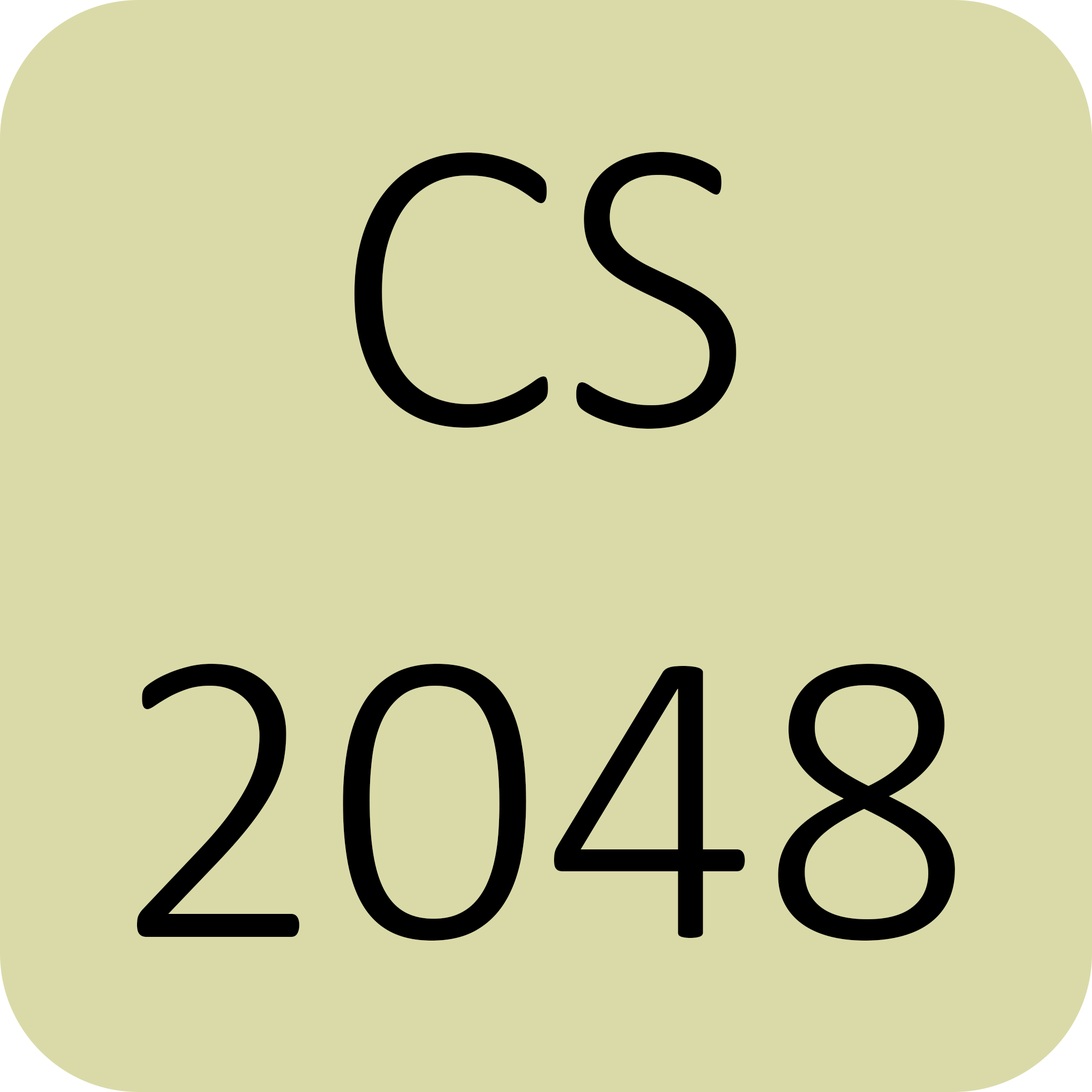
<style>
.page{position:relative;width:1092px;height:1092px;background:#dadaa9}
.page>*{position:absolute;margin:0}
.t1{font:426.6px "Calibri-Light";color:#000000}
</style>
<div class="page">
<p class="t1" style="left:137px;top:152px;width:818px;height:789px;text-align:center">CS<br>2048</p>
</div>
